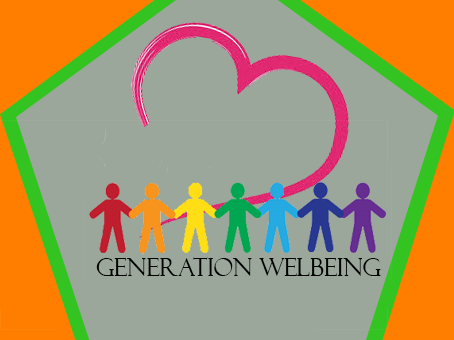
<style>
.page{position:relative;width:454px;height:340px;background:#9ba79a}
.page>*{position:absolute;margin:0}
.t1{font:24px "FelixTitlingMT";color:#000000}
</style>
<div class="page">
<p class="t1" style="left:96px;top:257px;width:285px;height:19px">Generation welbeing</p>
</div>
